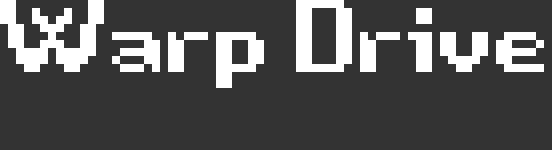
<style>
.page{position:relative;width:552px;height:150px;background:#333333}
.page>*{position:absolute;margin:0}
.t1{font:256px "Game-Over";color:#ffffff}
</style>
<div class="page">
<p class="t1" style="left:0px;top:0px;width:544px;height:88px">Warp Drive</p>
</div>
